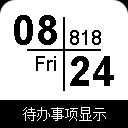
<style>
.page{position:relative;width:128px;height:128px;background:#ffffff}
.page>*{position:absolute;margin:0}
.t1{font:42px "Arial-BoldMT";color:#000000}
.t2{font:20px "ArialMT";color:#000000}
.t3{font:42px "Arial-BoldMT";color:#010101}
.t4{font:14px "SimSun";color:#ffffff}
</style>
<div class="page">
<p class="t1" style="left:14px;top:15px;width:43px;height:30px">08</p>
<p class="t2" style="left:70px;top:30px;width:31px;height:15px">818</p>
<p class="t2" style="left:36px;top:56px;width:20px;height:15px">Fri</p>
<p class="t3" style="left:70px;top:56px;width:44px;height:30px">24</p>
<p class="t4" style="left:23px;top:107px;width:83px;height:14px">待办事项显示</p>
</div>
